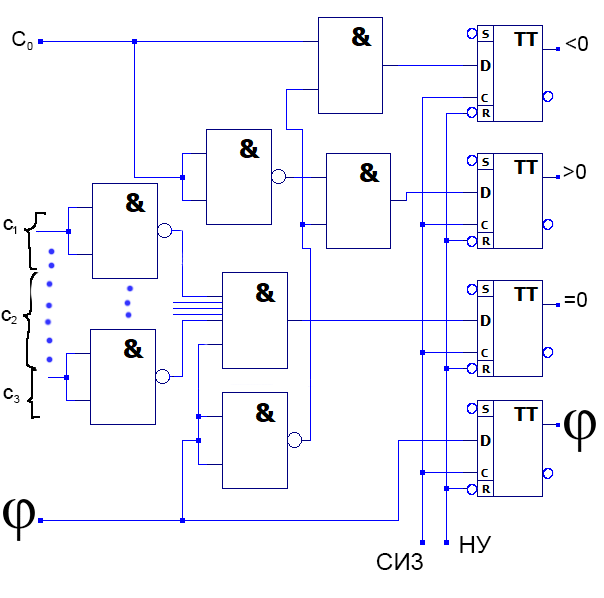
<style>
.page{position:relative;width:604px;height:598px;background:#ffffff}
.page>*{position:absolute;margin:0}
.t1{font:21.3px "ArialMT";color:#000000}
.t2{font:10.7px "ArialMT";color:#000000}
.t3{font:24px "ArialMT";color:#000000}
</style>
<div class="page">
<p class="t1" style="left:12px;top:31px;width:14px;height:15px">C</p>
<p class="t1" style="left:565px;top:36px;width:23px;height:15px">&lt;0</p>
<p class="t2" style="left:27px;top:42px;width:6px;height:8px">0</p>
<p class="t1" style="left:563px;top:164px;width:23px;height:15px">&gt;0</p>
<p class="t1" style="left:3px;top:219px;width:11px;height:11px">c</p>
<p class="t2" style="left:13px;top:226px;width:4px;height:8px">1</p>
<p class="t1" style="left:564px;top:292px;width:23px;height:15px">=0</p>
<p class="t1" style="left:1px;top:310px;width:11px;height:11px">c</p>
<p class="t2" style="left:11px;top:316px;width:6px;height:8px">2</p>
<p class="t1" style="left:3px;top:388px;width:11px;height:11px">c</p>
<p class="t2" style="left:14px;top:395px;width:6px;height:8px">3</p>
<p class="t3" style="left:460px;top:536px;width:32px;height:17px">НУ</p>
<p class="t3" style="left:376px;top:553px;width:47px;height:17px">СИ3</p>
</div>
